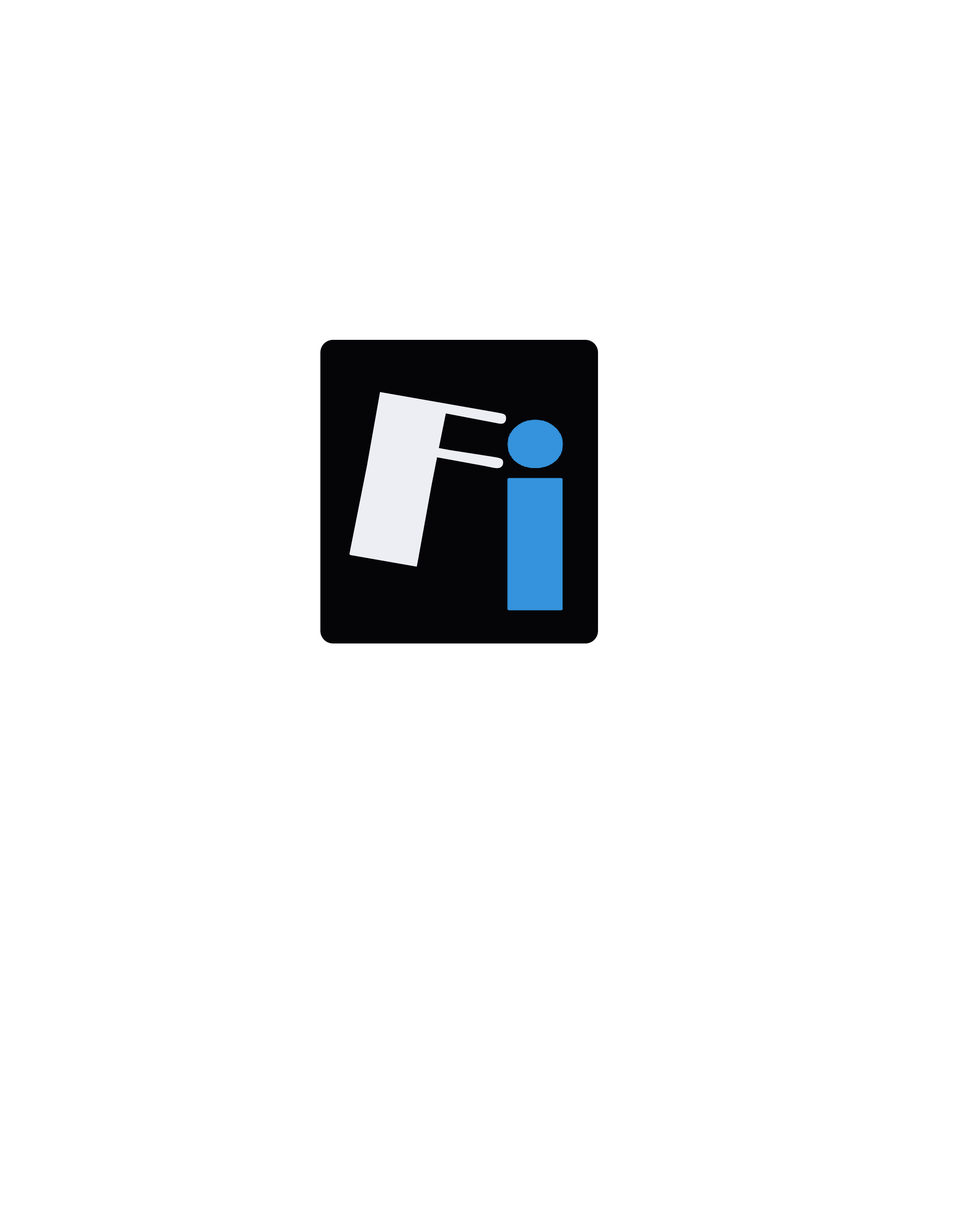
<style>
.page{position:relative;width:977px;height:1221px;background:#ffffff}
.page>*{position:absolute;margin:0}
.t1{font:245.7px "Broadway";letter-spacing:0.2em;color:#edeef4;font-weight:bold;scale:0.91 1}
</style>
<div class="page">
<p class="t1" style="left:349px;top:392px;width:157px;height:175px;rotate:10deg">F</p>
</div>
